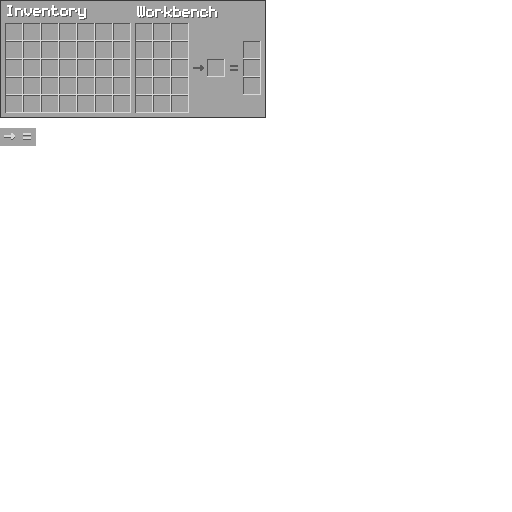
<style>
.page{position:relative;width:512px;height:512px;background:#ffffff}
.page>*{position:absolute;margin:0}
.t1{font:24px "Coder's-Crux";color:#ffffff}
</style>
<div class="page">
<p class="t1" style="left:7px;top:5px;width:79px;height:14px">Inventory</p>
<p class="t1" style="left:137px;top:6px;width:80px;height:11px">Workbench</p>
</div>
